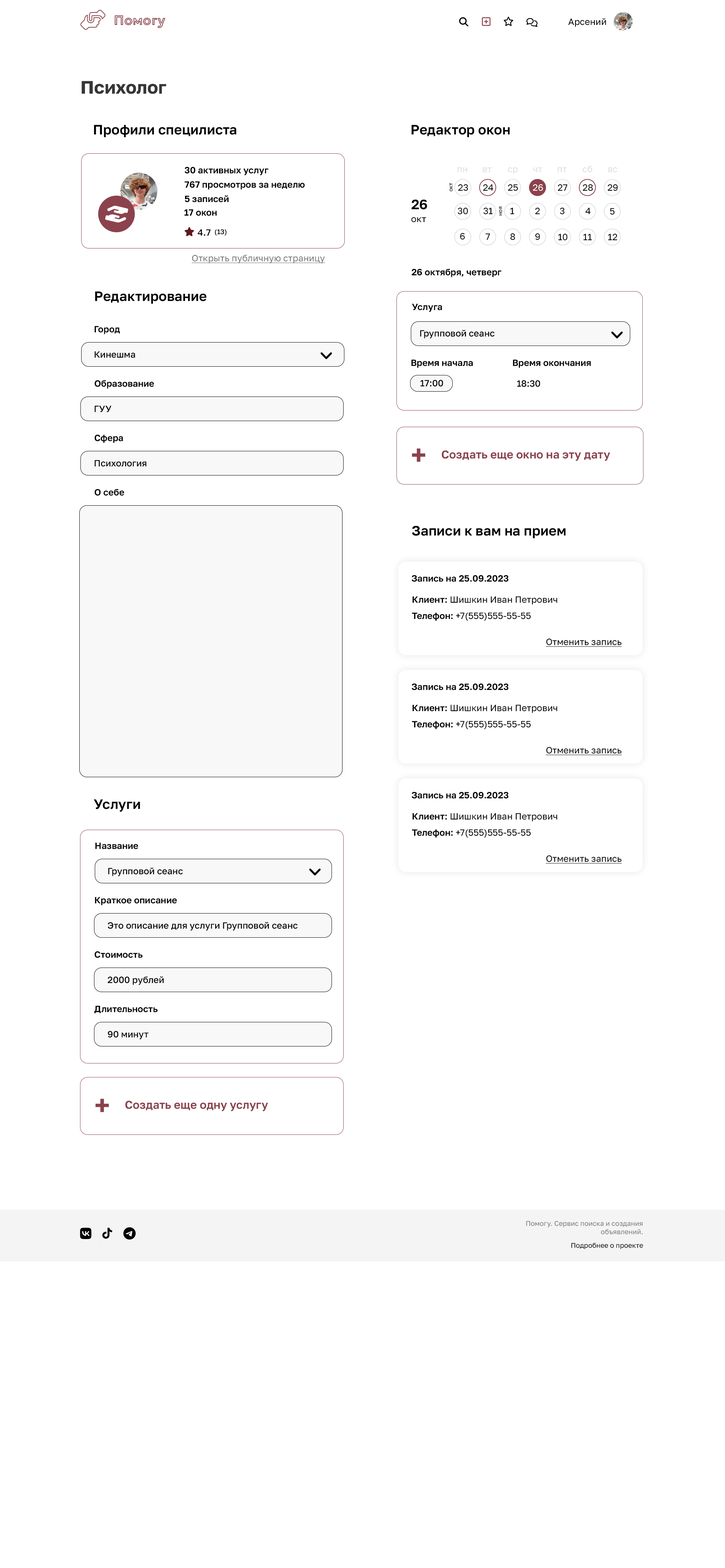
<style>
.page{position:relative;width:725px;height:1568px;background:#ffffff}
.page>*{position:absolute;margin:0}
.t1{font:13.6px "Geologica-Bold"}
.t2{font:9.1px "GolosText-Regular";color:#000000}
.t3{font:18.1px "GolosText-Bold";color:#363636}
.t4{font:13.6px "GolosText-SemiBold";color:#020202}
.t5{font:9.1px "GolosText-SemiBold";color:#020202}
.t6{font:9.1px "GolosText-Regular";color:#e0e0e0}
.t7{font:5.3px "GolosText-Regular";color:#000000}
.t8{font:9.1px "GolosText-Regular";color:#020202}
.t9{font:9.1px "GolosText-Regular";color:#ffffff}
.t10{font:9.1px "GolosText-Medium";color:#000000}
.t11{font:6.8px "GolosText-Medium";color:#000000}
.t12{font:9.1px "GolosText-Regular";color:#7c7c7c;text-decoration:underline}
.t13{font:9.1px "GolosText-Medium";color:#020202}
.t14{font:27.2px "GolosText-SemiBold";color:#8b424c}
.t15{font:11.3px "GolosText-SemiBold";color:#8b424c}
.t16{font:9.1px "GolosText-Regular";color:#020202;text-decoration:underline}
.t17{font:6.8px "GolosText-Regular";color:#7c7c7c}
.t18{font:6.8px "GolosText-Regular";color:#000000}
</style>
<div class="page">
<p class="t1" style="left:114px;top:15px;width:51px;height:13px">Помогу</p>
<p class="t2" style="left:568px;top:18px;width:38px;height:9px">Арсений</p>
<p class="t3" style="left:82px;top:81px;width:84px;height:13px">Психолог</p>
<p class="t4" style="left:94px;top:125px;width:142px;height:12px">Профили специлиста</p>
<p class="t4" style="left:412px;top:125px;width:98px;height:12px">Редактор окон</p>
<p class="t5" style="left:185px;top:167px;width:84px;height:8px">30 активных услуг</p>
<p class="t6" style="left:457px;top:167px;width:11px;height:6px">пн</p>
<p class="t6" style="left:483px;top:167px;width:9px;height:6px">вт</p>
<p class="t6" style="left:508px;top:167px;width:10px;height:7px">ср</p>
<p class="t6" style="left:533px;top:167px;width:9px;height:6px">чт</p>
<p class="t6" style="left:557px;top:167px;width:10px;height:6px">пт</p>
<p class="t6" style="left:582px;top:165px;width:11px;height:8px">сб</p>
<p class="t6" style="left:608px;top:167px;width:9px;height:6px">вс</p>
<p class="t5" style="left:185px;top:181px;width:120px;height:9px">767 просмотров за неделю</p>
<p class="t7" style="left:449px;top:183px;width:4px;height:8px;rotate:-90deg">окт</p>
<p class="t8" style="left:458px;top:184px;width:10px;height:7px">23</p>
<p class="t8" style="left:483px;top:184px;width:11px;height:7px">24</p>
<p class="t8" style="left:508px;top:184px;width:10px;height:7px">25</p>
<p class="t9" style="left:533px;top:184px;width:10px;height:7px">26</p>
<p class="t8" style="left:558px;top:184px;width:10px;height:7px">27</p>
<p class="t8" style="left:583px;top:184px;width:10px;height:7px">28</p>
<p class="t8" style="left:608px;top:184px;width:10px;height:7px">29</p>
<p class="t5" style="left:185px;top:195px;width:44px;height:7px">5 записей</p>
<p class="t5" style="left:184px;top:209px;width:33px;height:7px">17 окон</p>
<p class="t4" style="left:412px;top:199px;width:15px;height:11px">26</p>
<p class="t8" style="left:458px;top:207px;width:10px;height:8px">30</p>
<p class="t8" style="left:483px;top:207px;width:10px;height:8px">31</p>
<p class="t7" style="left:499px;top:207px;width:3px;height:9px;rotate:-90deg">ноя</p>
<p class="t8" style="left:510px;top:208px;width:4px;height:7px">1</p>
<p class="t8" style="left:535px;top:207px;width:5px;height:8px">2</p>
<p class="t8" style="left:560px;top:207px;width:5px;height:8px">3</p>
<p class="t8" style="left:585px;top:208px;width:6px;height:7px">4</p>
<p class="t8" style="left:610px;top:208px;width:5px;height:7px">5</p>
<p class="t8" style="left:411px;top:217px;width:15px;height:5px">окт</p>
<p class="t10" style="left:198px;top:229px;width:13px;height:7px">4.7</p>
<p class="t11" style="left:215px;top:229px;width:12px;height:7px">(13)</p>
<p class="t8" style="left:460px;top:233px;width:5px;height:7px">6</p>
<p class="t8" style="left:485px;top:233px;width:5px;height:7px">7</p>
<p class="t8" style="left:510px;top:233px;width:5px;height:7px">8</p>
<p class="t8" style="left:535px;top:233px;width:5px;height:7px">9</p>
<p class="t8" style="left:558px;top:233px;width:10px;height:8px">10</p>
<p class="t8" style="left:583px;top:234px;width:9px;height:7px">11</p>
<p class="t8" style="left:608px;top:233px;width:9px;height:8px">12</p>
<p class="t12" style="left:191px;top:255px;width:134px;height:9px">Открыть публичную страницу</p>
<p class="t5" style="left:412px;top:269px;width:90px;height:8px">26 октября, четверг</p>
<p class="t4" style="left:95px;top:291px;width:112px;height:13px">Редактирование</p>
<p class="t5" style="left:412px;top:304px;width:30px;height:8px">Услуга</p>
<p class="t5" style="left:94px;top:326px;width:26px;height:8px">Город</p>
<p class="t13" style="left:420px;top:330px;width:75px;height:8px">Групповой сеанс</p>
<p class="t13" style="left:94px;top:351px;width:41px;height:7px">Кинешма</p>
<p class="t5" style="left:411px;top:360px;width:62px;height:8px">Время начала</p>
<p class="t5" style="left:513px;top:360px;width:78px;height:8px">Время окончания</p>
<p class="t5" style="left:94px;top:380px;width:60px;height:9px">Образование</p>
<p class="t13" style="left:420px;top:380px;width:23px;height:7px">17:00</p>
<p class="t13" style="left:517px;top:380px;width:23px;height:7px">18:30</p>
<p class="t13" style="left:94px;top:406px;width:17px;height:6px">ГУУ</p>
<p class="t5" style="left:94px;top:435px;width:29px;height:8px">Сфера</p>
<p class="t14" style="left:412px;top:448px;width:14px;height:14px">+</p>
<p class="t13" style="left:94px;top:460px;width:53px;height:7px">Психология</p>
<p class="t15" style="left:442px;top:450px;width:168px;height:11px">Создать еще окно на эту дату</p>
<p class="t5" style="left:94px;top:489px;width:30px;height:7px">О себе</p>
<p class="t4" style="left:412px;top:526px;width:154px;height:13px">Записи к вам на прием</p>
<p class="t5" style="left:412px;top:575px;width:97px;height:7px">Запись на 25.09.2023</p>
<p class="t8" style="left:412px;top:596px;width:145px;height:9px"><span class="t5">Клиент:</span> Шишкин Иван Петрович</p>
<p class="t8" style="left:412px;top:613px;width:119px;height:8px"><span class="t5">Телефон:</span> +7(555)555-55-55</p>
<p class="t16" style="left:546px;top:638px;width:76px;height:9px">Отменить запись</p>
<p class="t5" style="left:412px;top:684px;width:97px;height:6px">Запись на 25.09.2023</p>
<p class="t8" style="left:412px;top:705px;width:145px;height:8px"><span class="t5">Клиент:</span> Шишкин Иван Петрович</p>
<p class="t8" style="left:412px;top:721px;width:119px;height:8px"><span class="t5">Телефон:</span> +7(555)555-55-55</p>
<p class="t16" style="left:546px;top:747px;width:76px;height:8px">Отменить запись</p>
<p class="t5" style="left:412px;top:792px;width:97px;height:7px">Запись на 25.09.2023</p>
<p class="t4" style="left:94px;top:799px;width:46px;height:13px">Услуги</p>
<p class="t8" style="left:412px;top:813px;width:145px;height:8px"><span class="t5">Клиент:</span> Шишкин Иван Петрович</p>
<p class="t8" style="left:412px;top:829px;width:119px;height:9px"><span class="t5">Телефон:</span> +7(555)555-55-55</p>
<p class="t5" style="left:95px;top:843px;width:43px;height:6px">Название</p>
<p class="t16" style="left:546px;top:855px;width:76px;height:9px">Отменить запись</p>
<p class="t13" style="left:108px;top:867px;width:75px;height:9px">Групповой сеанс</p>
<p class="t5" style="left:95px;top:897px;width:82px;height:8px">Краткое описание</p>
<p class="t13" style="left:108px;top:922px;width:190px;height:9px">Это описание для услуги Групповой сеанс</p>
<p class="t5" style="left:94px;top:951px;width:49px;height:7px">Стоимость</p>
<p class="t13" style="left:108px;top:976px;width:56px;height:9px">2000 рублей</p>
<p class="t5" style="left:94px;top:1006px;width:64px;height:7px">Длительность</p>
<p class="t13" style="left:108px;top:1031px;width:40px;height:8px">90 минут</p>
<p class="t14" style="left:96px;top:1099px;width:13px;height:13px">+</p>
<p class="t15" style="left:125px;top:1100px;width:143px;height:11px">Создать еще одну услугу</p>
<p class="t17" style="left:526px;top:1221px;width:117px;height:14px;text-align:right">Помогу. Сервис поиска и создания<br>объявлений.</p>
<p class="t18" style="left:571px;top:1243px;width:72px;height:6px">Подробнее о проекте</p>
</div>
